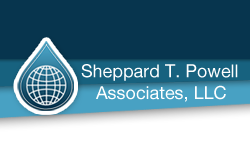
<style>
.page{position:relative;width:250px;height:150px;background:#07354e}
.page>*{position:absolute;margin:0}
.t1{font:18px "HelveticaNeue";color:#ffffff}
</style>
<div class="page">
<p class="t1" style="left:81px;top:64px;width:157px;height:38px">Sheppard T. Powell <br>   Associates, LLC</p>
</div>
